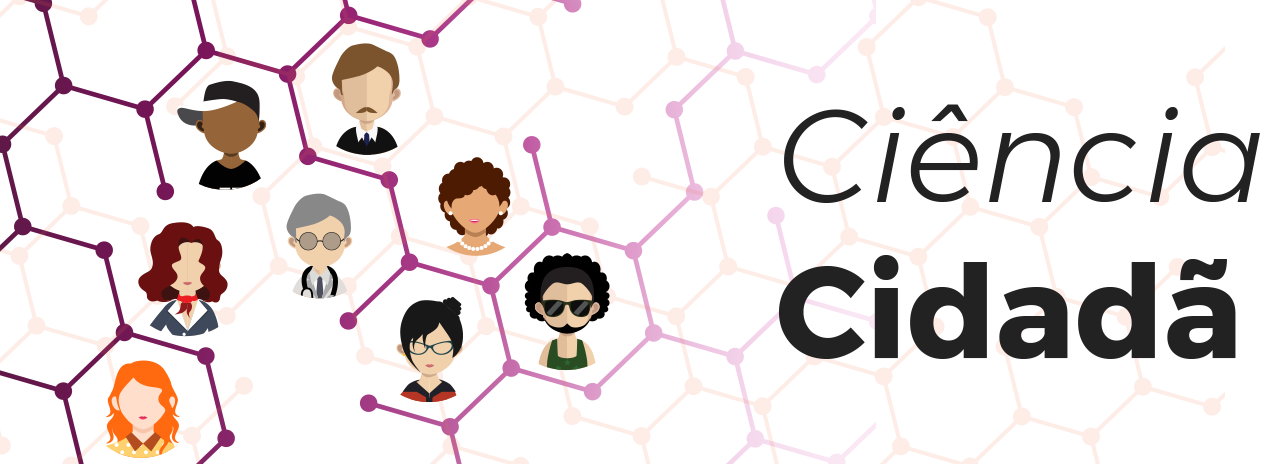
<style>
.page{position:relative;width:1280px;height:464px;background:#ffffff}
.page>*{position:absolute;margin:0}
.t1{font:130px "Montserrat-LightItalic";color:#222222}
.t2{font:130px "Montserrat-Bold";color:#222222}
</style>
<div class="page">
<p class="t1" style="left:778px;top:104px;width:482px;height:255px">Ciência <span class="t2">Cidadã</span></p>
</div>
